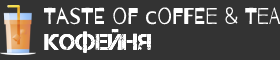
<style>
.page{position:relative;width:280px;height:60px;background:#333333}
.page>*{position:absolute;margin:0}
.t1{font:23px "Barrio-Regular";color:#ffffff}
.t2{font:23px "DejaVuSans";color:#ffffff}
.t3{font:23px "Captureit";color:#ffffff}
</style>
<div class="page">
<p class="t1" style="left:43px;top:7px;width:238px;height:18px">Taste of <span class="t2">с</span>offee &amp; Tea</p>
<p class="t3" style="left:44px;top:29px;width:107px;height:24px">КОФЕЙНЯ</p>
</div>
